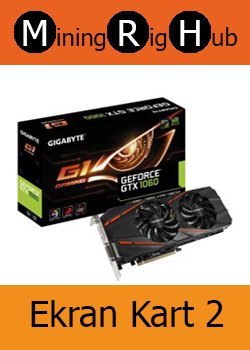
<style>
.page{position:relative;width:250px;height:350px;background:#ffffff}
.page>*{position:absolute;margin:0}
.t1{font:36px "Tahoma";color:#ffffff}
.t2{font:24px "Tahoma";color:#000000}
.t3{font:36px "Tahoma";color:#000000}
</style>
<div class="page">
<p class="t1" style="left:23px;top:20px;width:24px;height:26px">M</p>
<p class="t2" style="left:57px;top:28px;width:49px;height:23px">ining</p>
<p class="t1" style="left:119px;top:20px;width:21px;height:26px">R</p>
<p class="t2" style="left:150px;top:28px;width:17px;height:23px">ig</p>
<p class="t1" style="left:180px;top:20px;width:20px;height:26px">H</p>
<p class="t2" style="left:212px;top:27px;width:26px;height:19px">ub</p>
<p class="t3" style="left:31px;top:300px;width:193px;height:27px">Ekran Kart 2</p>
</div>
